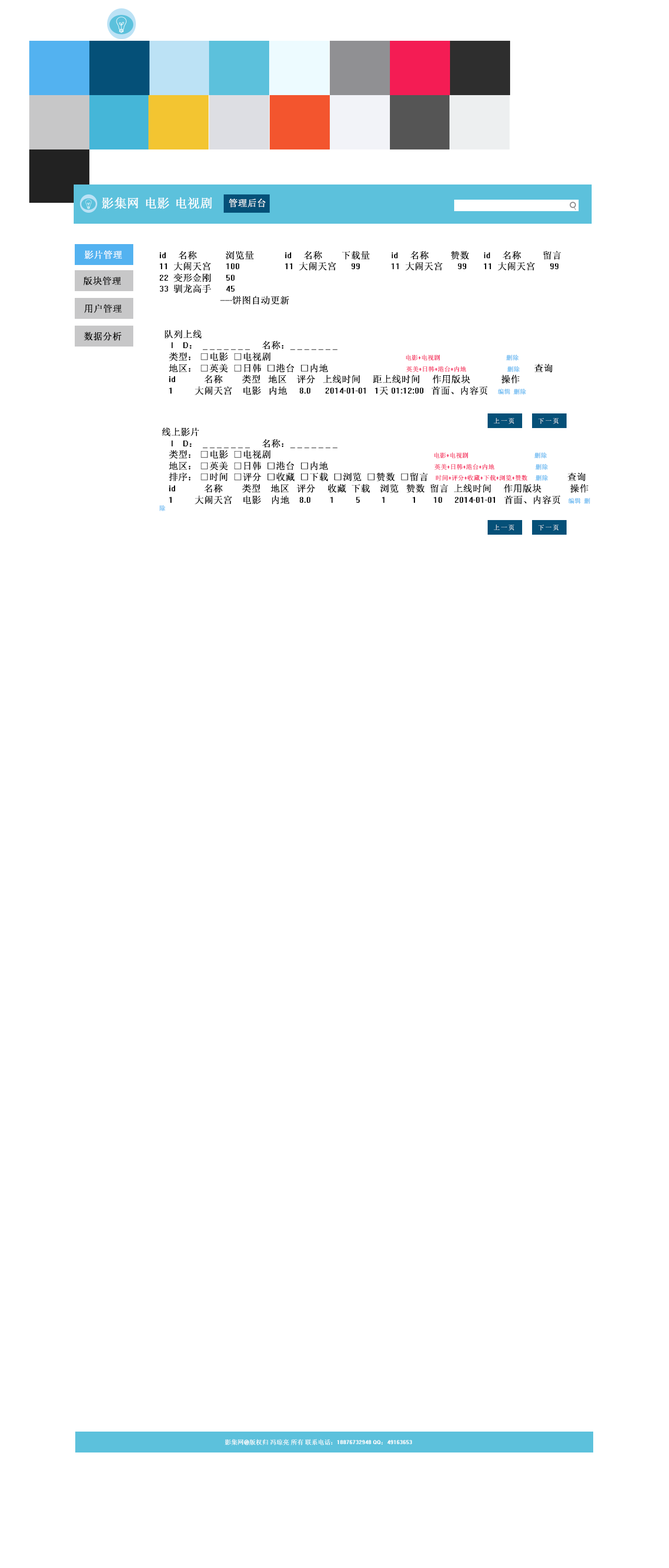
<style>
.page{position:relative;width:669px;height:1568px;background:#ffffff}
.page>*{position:absolute;margin:0}
.t1{font:12.5px "System";color:#ffffff}
.t2{font:12.6px "System";color:#ffffff}
.t3{font:9.4px "System";color:#ffffff}
.t4{font:9.4px "System";color:#000000}
.t5{font:6.3px "System";color:#f41c54}
.t6{font:6.3px "System";color:#53b2f0}
.t7{font:7.3px "System";color:#ffffff}
.t8{font:6.3px "System";color:#ffffff}
</style>
<div class="page">
<p class="t1" style="left:102px;top:197px;width:37px;height:12px">影集网</p>
<p class="t2" style="left:146px;top:197px;width:23px;height:12px">电影</p>
<p class="t2" style="left:176px;top:197px;width:36px;height:12px">电视剧</p>
<p class="t3" style="left:229px;top:199px;width:37px;height:8px">管理后台</p>
<p class="t3" style="left:84px;top:250px;width:38px;height:9px">影片管理</p>
<p class="t4" style="left:159px;top:251px;width:431px;height:260px">id     名称            浏览量             id     名称        下载量         id     名称         赞数      id     名称         留言<br>11  大闹天宫      100                   11  大闹天宫      99             11  大闹天宫      99       11  大闹天宫      99<br>22  变形金刚      50<br>33  驯龙高手      45     <br>                          -----饼图自动更新<br><br><br>  队列上线<br>     I    D：  _ _ _ _ _ _ _     名称：_ _ _ _ _ _ _                                                                                     <br>    类型： □电影  □电视剧                                                         <span class="t5">电影+电视剧                                          </span><span class="t6">删除<br></span>    地区： □英美  □日韩  □港台  □内地                                 <span class="t5">英美+日韩+港台+内地                          </span><span class="t6">删除         </span>查询<br>    id            名称        类型   地区    评分   上线时间     距上线时间     作用版块             操作<br>    1         大闹天宫    电影   内地     8.0      2014-01-01   1天 01:12:00   首面、内容页    <span class="t6">编辑  删除<br><br><br><br><br></span> 线上影片<br>     I    D：  _ _ _ _ _ _ _     名称：_ _ _ _ _ _ _                                                                                  <br>    类型： □电影  □电视剧                                                                     <span class="t5">电影+电视剧                                          </span><span class="t6">删除<br></span>    地区： □英美  □日韩  □港台  □内地                                             <span class="t5">英美+日韩+港台+内地                          </span><span class="t6">删除<br></span>    排序： □时间  □评分  □收藏  □下载  □浏览  □赞数  □留言   <span class="t5">时间+评分+收藏+下载+浏览+赞数     </span><span class="t6">删除            </span>查询<br>    id            名称        类型    地区   评分     收藏  下载    浏览   赞数  留言  上线时间     作用版块            操作<br>    1         大闹天宫    电影    内地    8.0        1         5         1           1       10     2014-01-01   首面、内容页   <span class="t6">编辑  删除</span></p>
<p class="t4" style="left:83px;top:276px;width:38px;height:9px">版块管理</p>
<p class="t4" style="left:84px;top:304px;width:38px;height:9px">用户管理</p>
<p class="t4" style="left:84px;top:332px;width:38px;height:9px">数据分析</p>
<p class="t7" style="left:493px;top:418px;width:21px;height:6px">上一页</p>
<p class="t7" style="left:538px;top:418px;width:21px;height:6px">下一页</p>
<p class="t7" style="left:493px;top:524px;width:21px;height:7px">上一页</p>
<p class="t7" style="left:538px;top:525px;width:21px;height:6px">下一页</p>
<p class="t8" style="left:225px;top:1439px;width:187px;height:6px">影集网@版权归 冯琼亮 所有 联系电话：18876732948 QQ：49163653</p>
</div>
